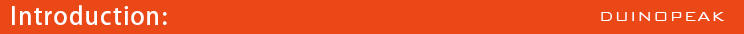
<style>
.page{position:relative;width:744px;height:34px;background:#ea4917}
.page>*{position:absolute;margin:0}
.t1{font:24px "AdobeHeitiStd-Regular";letter-spacing:0.05em;color:#ffffff}
.t2{font:18px "BankGothicBT-Light";letter-spacing:0.05em;color:#ffffff}
</style>
<div class="page">
<p class="t1" style="left:12px;top:5px;width:155px;height:20px">Introduction:</p>
<p class="t2" style="left:601px;top:12px;width:124px;height:9px">DUINOPEAK</p>
</div>
